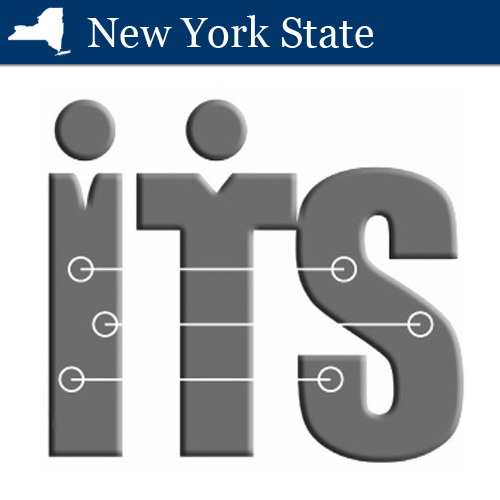
<style>
.page{position:relative;width:500px;height:500px;background:#fefefe}
.page>*{position:absolute;margin:0}
.t1{font:42.2px "Georgia";color:#ffffff}
</style>
<div class="page">
<p class="t1" style="left:87px;top:15px;width:287px;height:33px">New York State</p>
</div>
